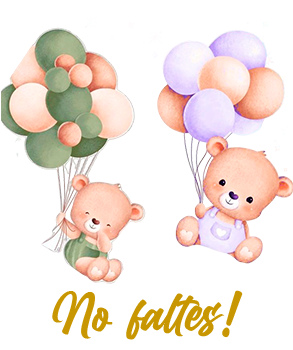
<style>
.page{position:relative;width:293px;height:350px;background:#ffffff}
.page>*{position:absolute;margin:0}
.t1{font:57px "BillionDreams";color:#c79600}
</style>
<div class="page">
<p class="t1" style="left:52px;top:290px;width:191px;height:50px">No faltes!</p>
</div>
